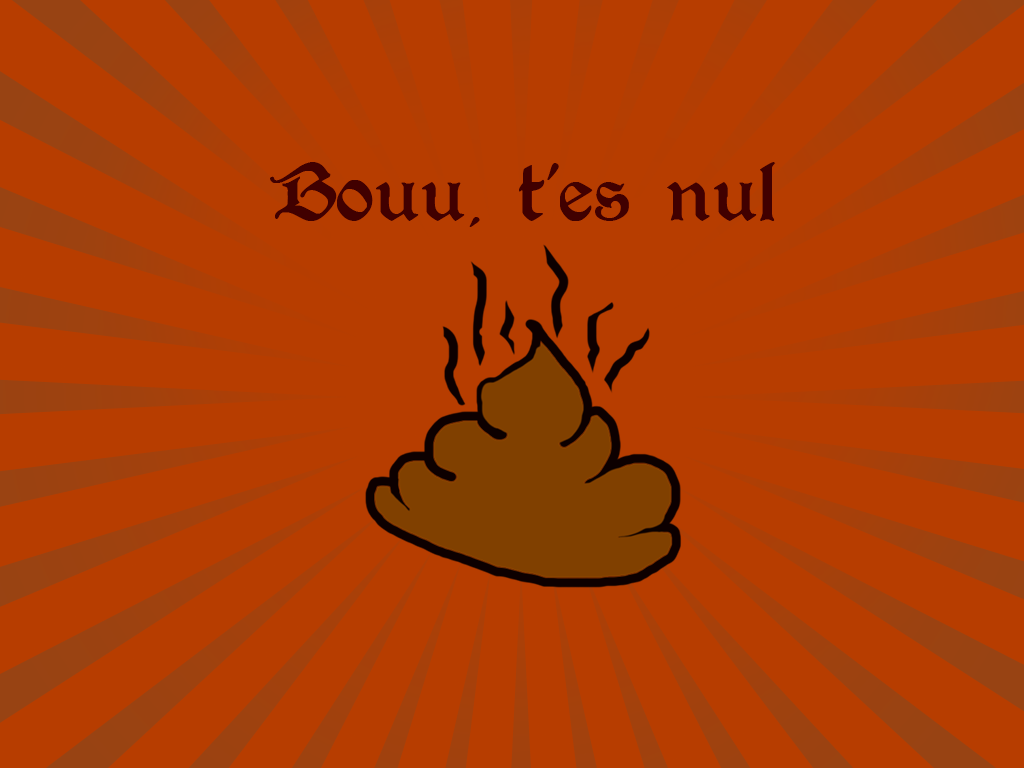
<style>
.page{position:relative;width:1024px;height:768px;background:#b73d00}
.page>*{position:absolute;margin:0}
.t1{font:92px "Augusta-Regular";color:#410000}
</style>
<div class="page">
<p class="t1" style="left:270px;top:162px;width:506px;height:65px">Bouu, t’es nul</p>
</div>
